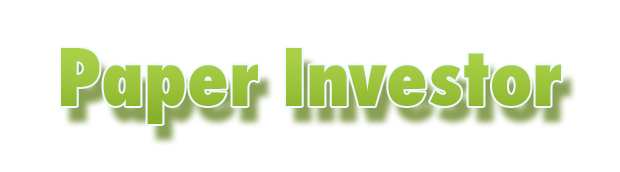
<style>
.page{position:relative;width:620px;height:172px;background:#ffffff}
.page>*{position:absolute;margin:0}
.t1{font:77px "Futura-CondensedExtraBold";color:#9bc92e}
</style>
<div class="page">
<p class="t1" style="left:61px;top:48px;width:500px;height:76px">Paper Investor</p>
</div>
